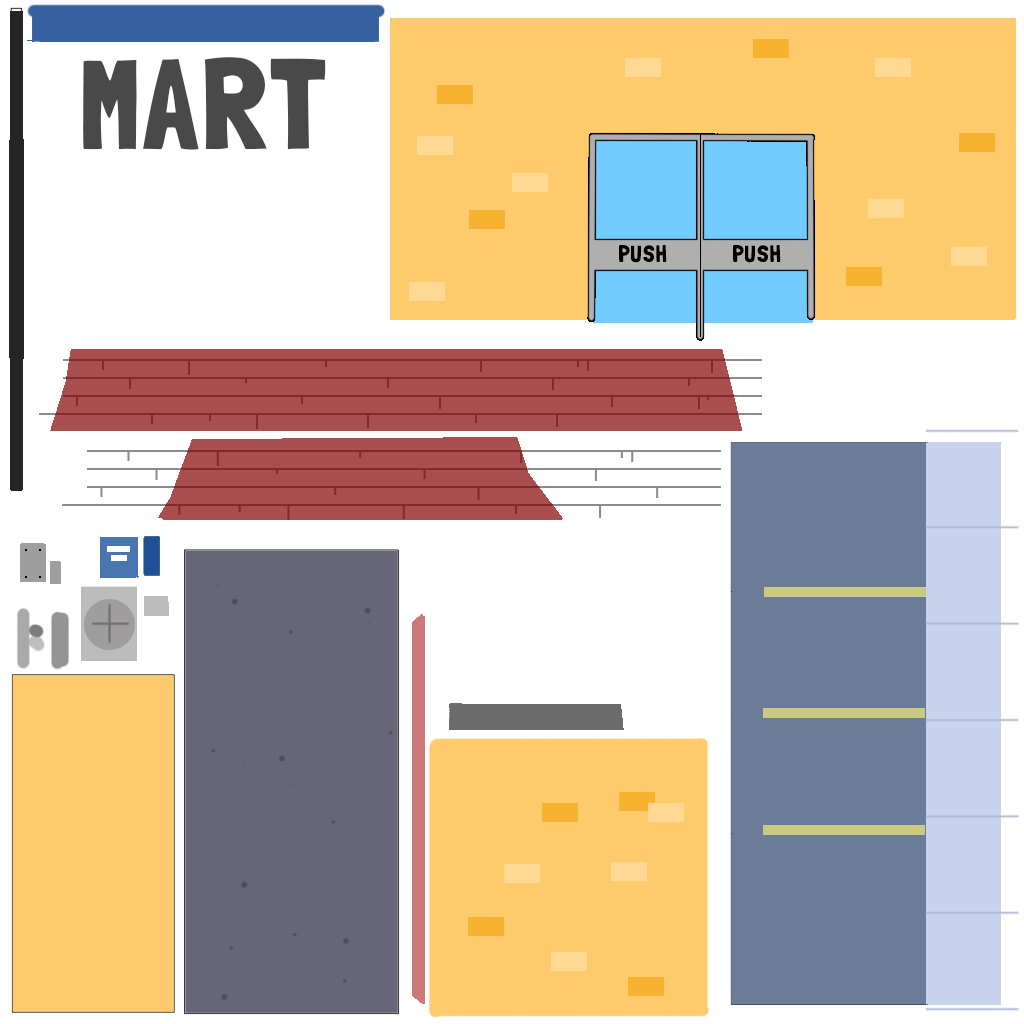
<style>
.page{position:relative;width:1024px;height:1024px;background:#ffffff}
.page>*{position:absolute;margin:0}
.t1{font:128px "LondrinaSolid-Regular";color:#4a4949}
.t2{font:24px "LondrinaSolid-Regular";color:#000000}
</style>
<div class="page">
<p class="t1" style="left:83px;top:57px;width:243px;height:93px">MART</p>
<p class="t2" style="left:619px;top:244px;width:48px;height:19px">PUSH</p>
<p class="t2" style="left:733px;top:244px;width:48px;height:19px">PUSH</p>
</div>
